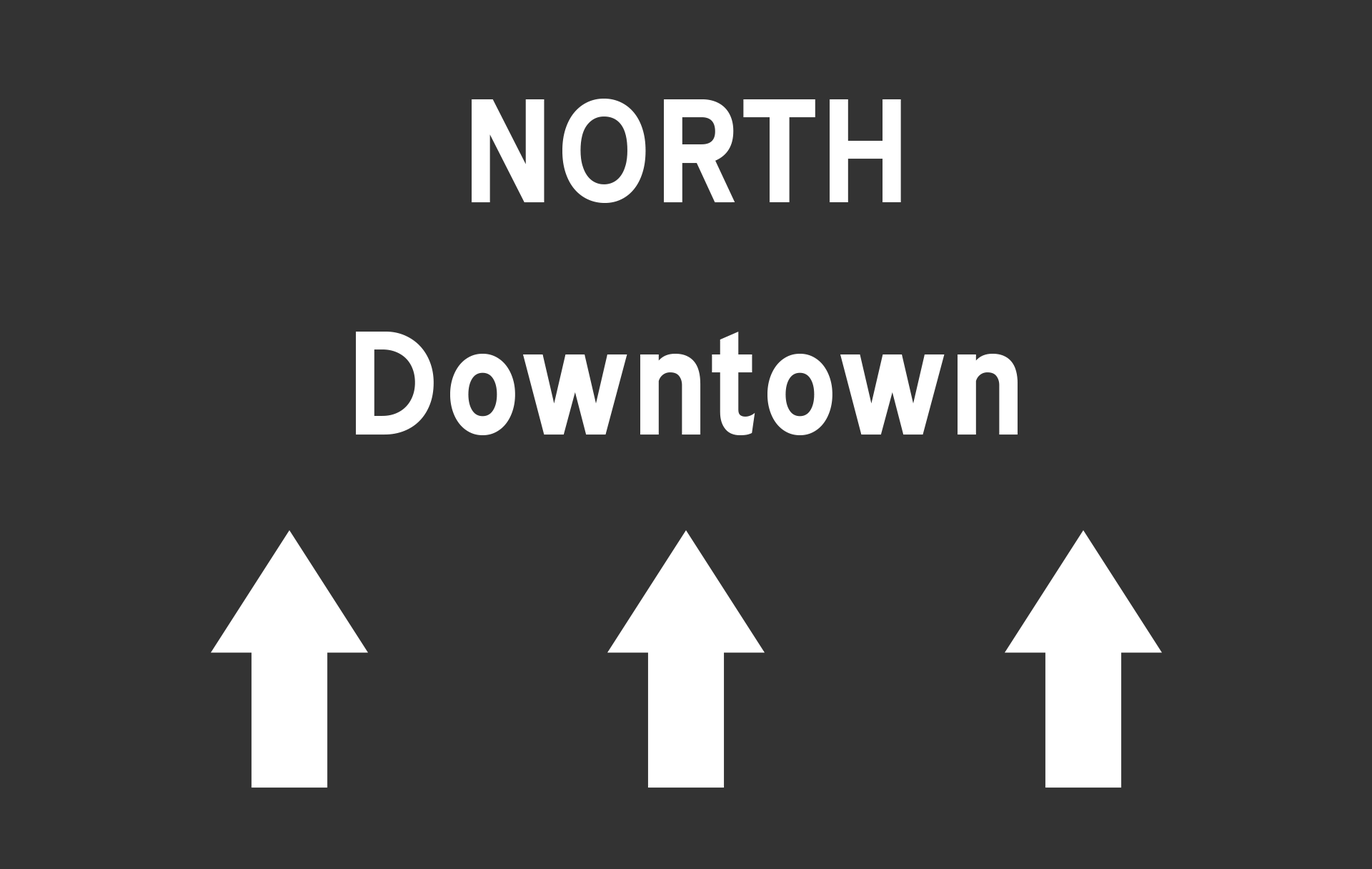
<style>
.page{position:relative;width:1372px;height:869px;background:#333333}
.page>*{position:absolute;margin:0}
.t1{font:142.9px "BlueHighway-Bold";letter-spacing:0.02em;color:#ffffff}
</style>
<div class="page">
<p class="t1" style="left:472px;top:99px;width:429px;height:104px">NORTH</p>
<p class="t1" style="left:356px;top:332px;width:662px;height:103px">Downtown</p>
</div>
